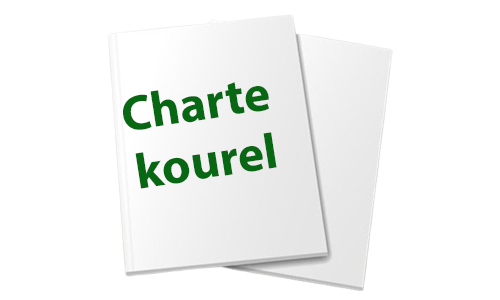
<style>
.page{position:relative;width:500px;height:300px;background:#ffffff}
.page>*{position:absolute;margin:0}
.t1{font:50px "MyriadPro-Bold";color:#076712}
</style>
<div class="page">
<p class="t1" style="left:123px;top:82px;width:146px;height:48px;rotate:-9deg">Charte</p>
<p class="t1" style="left:135px;top:132px;width:142px;height:57px;rotate:-9deg">kourel</p>
</div>
